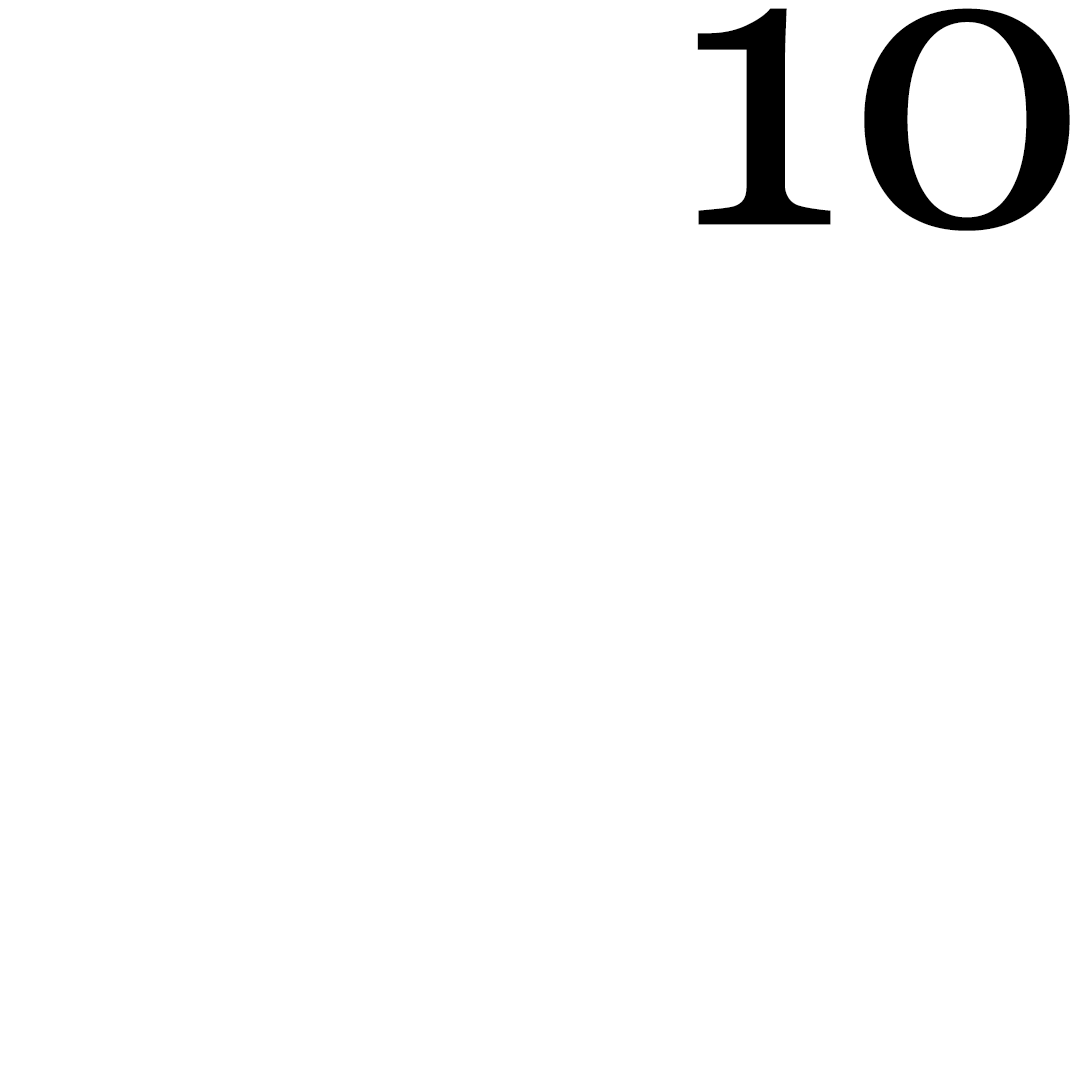
<style>
.page{position:relative;width:1080px;height:1080px;background:#ffffff}
.page>*{position:absolute;margin:0}
.t1{font:400px "Georgia";color:#000000}
</style>
<div class="page">
<p class="t1" style="left:697px;top:8px;width:373px;height:223px">10</p>
</div>
